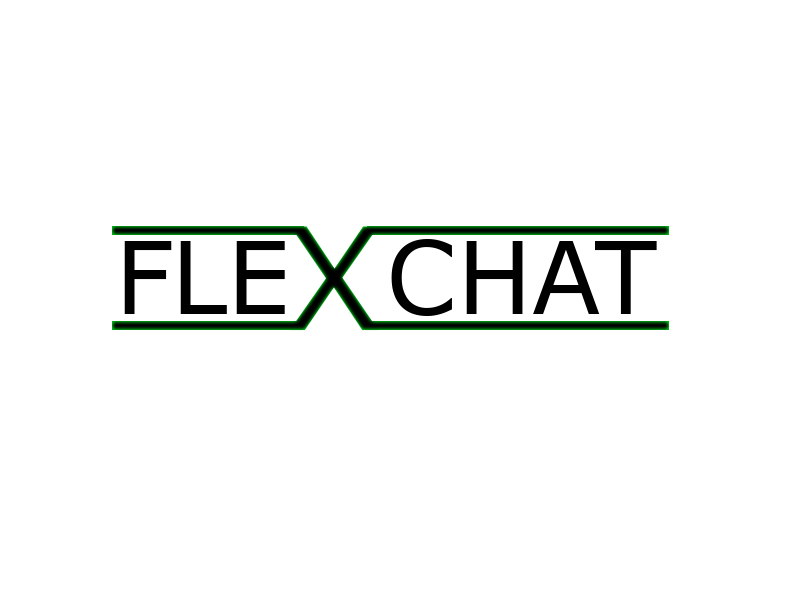
<style>
.page{position:relative;width:800px;height:600px;background:#ffffff}
.page>*{position:absolute;margin:0}
.t1{font:100px "MSReferenceSansSerif";color:#000000}
</style>
<div class="page">
<p class="t1" style="left:124px;top:241px;width:48px;height:73px">F</p>
<p class="t1" style="left:180px;top:241px;width:105px;height:73px">LE</p>
<p class="t1" style="left:391px;top:239px;width:61px;height:77px">C</p>
<p class="t1" style="left:466px;top:241px;width:191px;height:73px">HAT</p>
</div>
